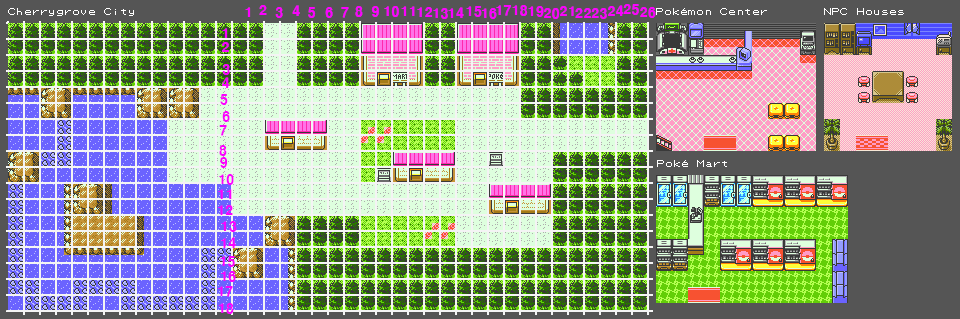
<style>
.page{position:relative;width:960px;height:319px}
.page>*{position:absolute;margin:0}
.t1{font:13.3px "H2gtrE";color:#fc00ff}
</style>
<div class="page">
<p class="t1" style="left:259px;top:5px;width:8px;height:10px">2</p>
<p class="t1" style="left:292px;top:5px;width:8px;height:11px">4</p>
<p class="t1" style="left:355px;top:6px;width:8px;height:11px">8</p>
<p class="t1" style="left:371px;top:6px;width:8px;height:11px">9</p>
<p class="t1" style="left:384px;top:6px;width:15px;height:11px">10</p>
<p class="t1" style="left:401px;top:6px;width:14px;height:10px">11</p>
<p class="t1" style="left:466px;top:6px;width:16px;height:11px">15</p>
<p class="t1" style="left:496px;top:5px;width:15px;height:11px">17</p>
<p class="t1" style="left:512px;top:5px;width:16px;height:11px">18</p>
<p class="t1" style="left:528px;top:6px;width:16px;height:11px">19</p>
<p class="t1" style="left:560px;top:6px;width:14px;height:10px">21</p>
<p class="t1" style="left:608px;top:5px;width:16px;height:11px">24</p>
<p class="t1" style="left:623px;top:4px;width:16px;height:11px">25</p>
<p class="t1" style="left:245px;top:7px;width:6px;height:10px">1</p>
<p class="t1" style="left:275px;top:7px;width:8px;height:11px">3</p>
<p class="t1" style="left:308px;top:7px;width:8px;height:11px">5</p>
<p class="t1" style="left:325px;top:7px;width:8px;height:11px">6</p>
<p class="t1" style="left:341px;top:7px;width:8px;height:11px">7</p>
<p class="t1" style="left:417px;top:7px;width:16px;height:10px">12</p>
<p class="t1" style="left:433px;top:8px;width:15px;height:11px">13</p>
<p class="t1" style="left:448px;top:7px;width:16px;height:11px">14</p>
<p class="t1" style="left:481px;top:8px;width:16px;height:11px">16</p>
<p class="t1" style="left:544px;top:8px;width:16px;height:11px">20</p>
<p class="t1" style="left:575px;top:8px;width:16px;height:10px">22</p>
<p class="t1" style="left:591px;top:8px;width:16px;height:11px">23</p>
<p class="t1" style="left:640px;top:7px;width:16px;height:11px">26</p>
<p class="t1" style="left:222px;top:28px;width:6px;height:10px">1</p>
<p class="t1" style="left:222px;top:42px;width:7px;height:10px">2</p>
<p class="t1" style="left:222px;top:64px;width:8px;height:11px">3</p>
<p class="t1" style="left:222px;top:77px;width:8px;height:11px">4</p>
<p class="t1" style="left:220px;top:94px;width:8px;height:11px">5</p>
<p class="t1" style="left:222px;top:111px;width:8px;height:11px">6</p>
<p class="t1" style="left:219px;top:125px;width:8px;height:11px">7</p>
<p class="t1" style="left:219px;top:145px;width:8px;height:11px">8</p>
<p class="t1" style="left:220px;top:157px;width:8px;height:11px">9</p>
<p class="t1" style="left:219px;top:174px;width:15px;height:11px">10</p>
<p class="t1" style="left:218px;top:189px;width:14px;height:10px">11</p>
<p class="t1" style="left:218px;top:205px;width:15px;height:10px">12</p>
<p class="t1" style="left:221px;top:221px;width:16px;height:11px">13</p>
<p class="t1" style="left:221px;top:237px;width:15px;height:11px">14</p>
<p class="t1" style="left:220px;top:256px;width:15px;height:11px">15</p>
<p class="t1" style="left:221px;top:271px;width:15px;height:11px">16</p>
<p class="t1" style="left:218px;top:286px;width:15px;height:11px">17</p>
<p class="t1" style="left:218px;top:303px;width:16px;height:11px">18</p>
</div>
